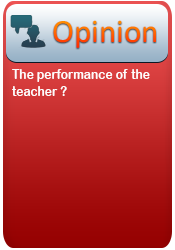
<style>
.page{position:relative;width:175px;height:250px}
.page>*{position:absolute;margin:0}
.t1{font:32.8px "Calibri"}
.t2{font:14.1px "ArialRoundedMTBold";color:#fefcfc;scale:0.86 1}
</style>
<div class="page">
<p class="t1" style="left:53px;top:20px;width:103px;height:28px">Opinion</p>
<p class="t2" style="left:12px;top:69px;width:138px;height:27px">The performance of the <br>teacher ?</p>
</div>
